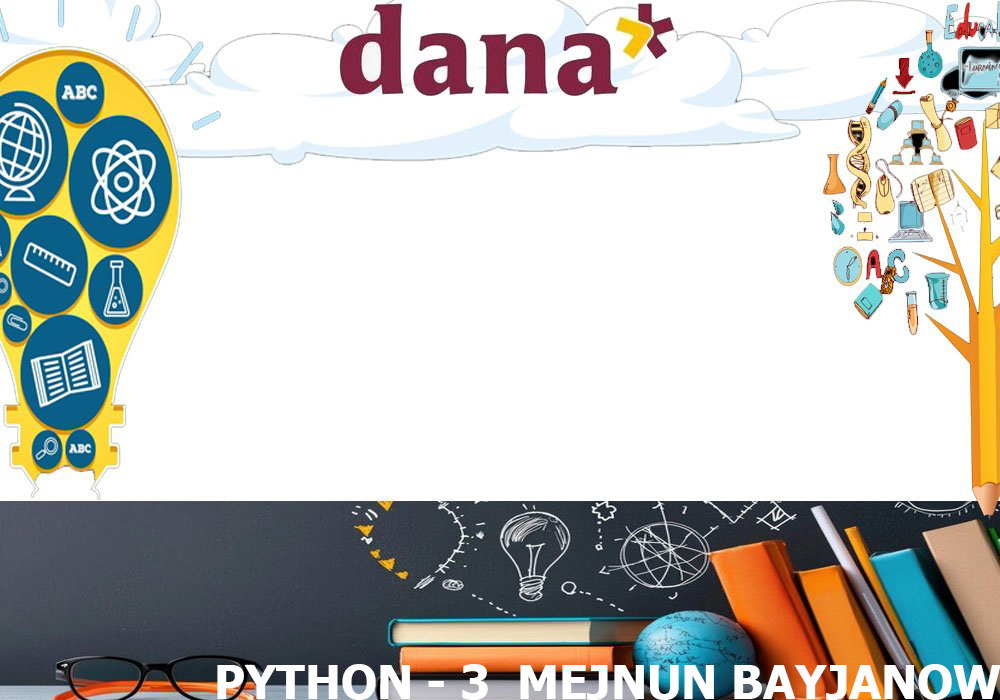
<style>
.page{position:relative;width:1000px;height:700px;background:#ffffff}
.page>*{position:absolute;margin:0}
.t1{font:46.7px "Tahoma-Bold";color:#ffffff}
</style>
<div class="page">
<p class="t1" style="left:217px;top:664px;width:784px;height:36px">PYTHON - 3  MEJNUN BAYJANOW</p>
</div>
